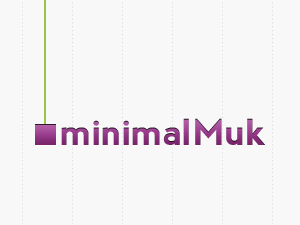
<style>
.page{position:relative;width:300px;height:225px;background:#f8f8f8}
.page>*{position:absolute;margin:0}
.t1{font:36px "nevis-Bold";letter-spacing:0.01em;color:#993c8c}
</style>
<div class="page">
<p class="t1" style="left:61px;top:118px;width:204px;height:27px">minimalMuk</p>
</div>
